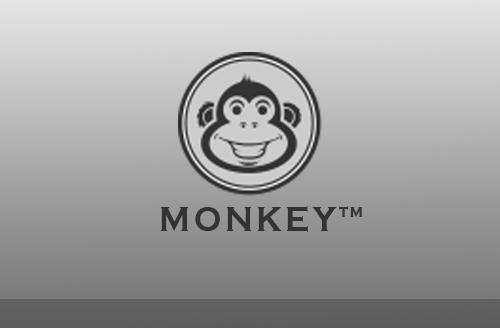
<style>
.page{position:relative;width:500px;height:328px}
.page>*{position:absolute;margin:0}
.t1{font:36px "CopperplateGothic-Bold";letter-spacing:0.1em;color:#333333;scale:0.9 1}
.t2{font:18px "CopperplateGothic-Bold";letter-spacing:0.1em;color:#333333;scale:0.9 1}
</style>
<div class="page">
<p class="t1" style="left:160px;top:206px;width:177px;height:26px">MONKEY</p>
<p class="t2" style="left:339px;top:206px;width:24px;height:11px">tm</p>
</div>
